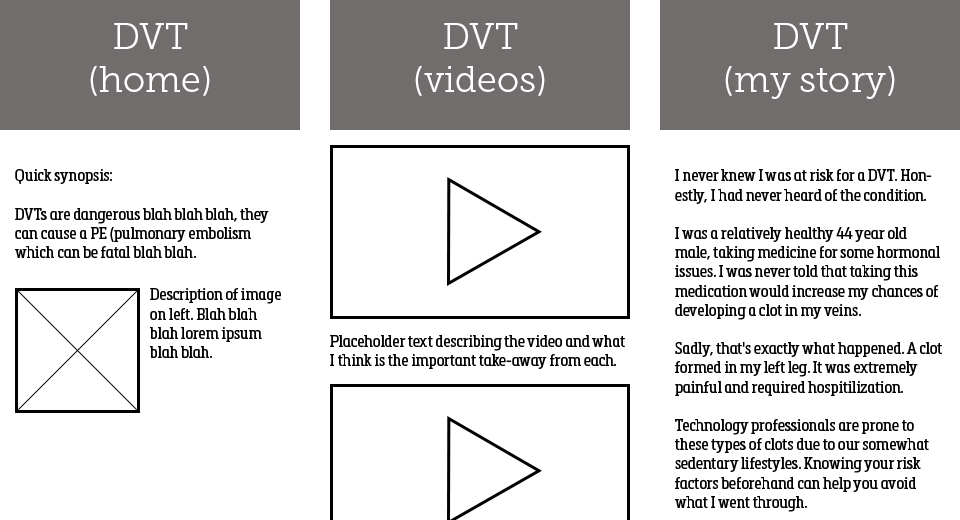
<style>
.page{position:relative;width:960px;height:520px;background:#ffffff}
.page>*{position:absolute;margin:0}
.t1{font:36px "MuseoSlab-300";color:#ffffff}
.t2{font:16px "MetronicSlabNarrowRegular";color:#000000}
</style>
<div class="page">
<p class="t1" style="left:90px;top:23px;width:120px;height:73px;text-align:center">DVT<br>(home)</p>
<p class="t1" style="left:415px;top:23px;width:130px;height:73px;text-align:center">DVT<br>(videos)</p>
<p class="t1" style="left:725px;top:23px;width:170px;height:76px;text-align:center">DVT<br>(my story)</p>
<p class="t2" style="left:15px;top:169px;width:254px;height:89px">Quick synopsis:<br><br>DVTs are dangerous blah blah blah, they can cause a PE (pulmonary embolism which can be fatal blah blah.</p>
<p class="t2" style="left:675px;top:169px;width:267px;height:343px">I never knew I was at risk for a DVT. Honestly, I had never heard of the condition.<br><br>I was a relatively healthy 44 year old male, taking medicine for some hormonal issues. I was never told that taking this medication would increase my chances of developing a clot in my veins.<br><br>Sadly, that's exactly what happened. A clot formed in my left leg. It was extremely painful and required hospitilization. <br><br>Technology professionals are prone to these types of clots due to our somewhat sedentary lifestyles. Knowing your risk factors beforehand can help you avoid what I went through.</p>
<p class="t2" style="left:150px;top:288px;width:131px;height:70px">Description of image on left. Blah blah blah lorem ipsum blah blah.</p>
<p class="t2" style="left:330px;top:335px;width:295px;height:34px">Placeholder text describing the video and what I think is the important take-away from each.</p>
</div>
